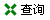
<style>
.page{position:relative;width:50px;height:20px;background:#ffffff}
.page>*{position:absolute;margin:0}
.t1{font:12px "SimSun";color:#000000}
</style>
<div class="page">
<p class="t1" style="left:21px;top:4px;width:23px;height:11px">查询</p>
</div>
